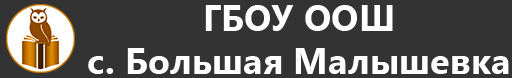
<style>
.page{position:relative;width:512px;height:78px;background:#333333}
.page>*{position:absolute;margin:0}
.t1{font:36.3px "SegoeUI-Bold";color:#ffffff}
</style>
<div class="page">
<p class="t1" style="left:88px;top:5px;width:421px;height:69px;text-align:center">ГБОУ ООШ<br>с. Большая Малышевка</p>
</div>
